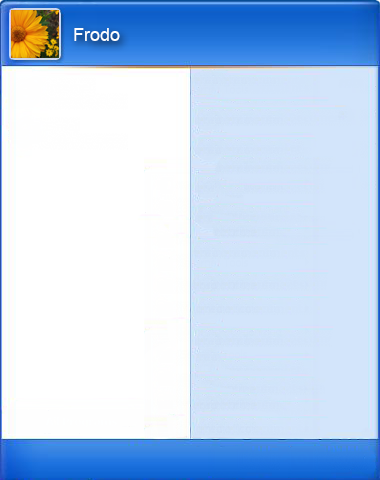
<style>
.page{position:relative;width:380px;height:480px;background:#ffffff}
.page>*{position:absolute;margin:0}
.t1{font:18px "ArialMT";color:#fefefe}
</style>
<div class="page">
<p class="t1" style="left:74px;top:28px;width:46px;height:13px">Frodo</p>
</div>
